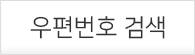
<style>
.page{position:relative;width:195px;height:55px;background:#ffffff}
.page>*{position:absolute;margin:0}
.t1{font:24px "NanumSquareR";color:#333333}
</style>
<div class="page">
<p class="t1" style="left:30px;top:16px;width:135px;height:23px">우편번호 검색</p>
</div>
